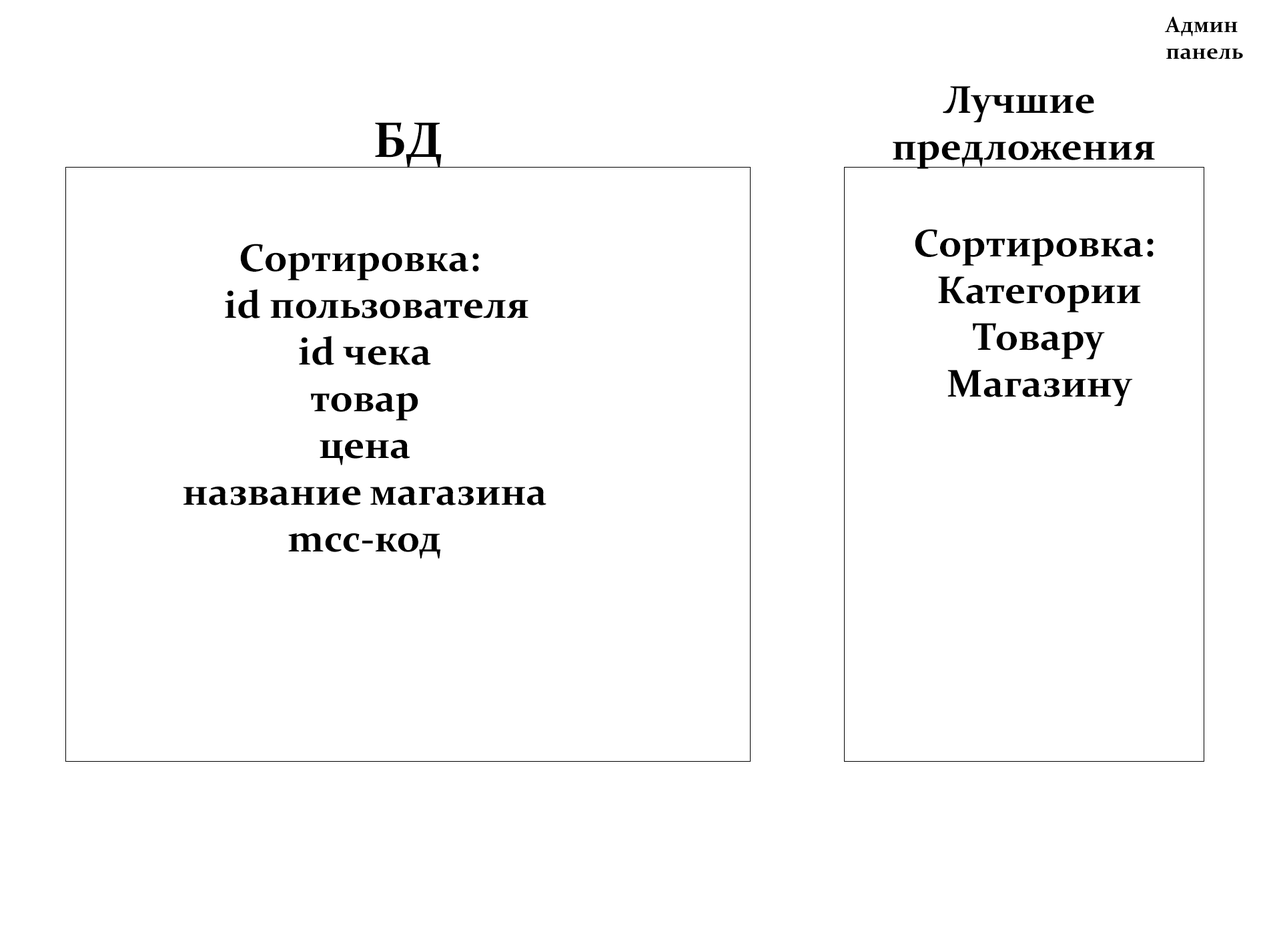
<style>
.page{position:relative;width:1261px;height:946px;background:#ffffff}
.page>*{position:absolute;margin:0}
.t1{font:22.2px "Constantia-Bold";color:#000000}
.t2{font:38.9px "Constantia-Bold";color:#000000}
.t3{font:50px "Constantia-Bold";color:#000000}
</style>
<div class="page">
<p class="t1" style="left:1164px;top:17px;width:79px;height:42px;text-align:center">Админ <br>панель</p>
<p class="t2" style="left:893px;top:86px;width:262px;height:83px;text-align:center">Лучшие <br>предложения</p>
<p class="t3" style="left:375px;top:122px;width:67px;height:46px">БД</p>
<p class="t2" style="left:915px;top:229px;width:239px;height:177px;text-align:center">Сортировка: <br>Категории<br>Товару<br>Магазину</p>
<p class="t2" style="left:183px;top:244px;width:363px;height:315px;text-align:center">Сортировка: <br> id пользователя<br>id чека<br>товар<br>цена<br>название магазина<br>mcc-код</p>
</div>
